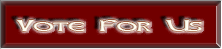
<style>
.page{position:relative;width:222px;height:49px;background:#710000}
.page>*{position:absolute;margin:0}
.t1{font:14px "CelticHand";color:#ffffff;scale:2.25 1}
</style>
<div class="page">
<p class="t1" style="left:17px;top:20px;width:185px;height:11px">Vote For Us</p>
</div>
